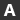
<style>
.page{position:relative;width:20px;height:20px;background:#333333}
.page>*{position:absolute;margin:0}
.t1{font:17px "SegoeUI-Bold";letter-spacing:-0.03em;color:#ffffff}
</style>
<div class="page">
<p class="t1" style="left:3px;top:4px;width:13px;height:12px">A</p>
</div>
